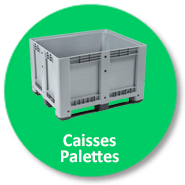
<style>
.page{position:relative;width:185px;height:185px;background:#00cc66}
.page>*{position:absolute;margin:0}
.t1{font:18px/16px "Calibri-Bold";color:#ffffff}
</style>
<div class="page">
<p class="t1" style="left:61px;top:134px;width:58px;height:29px;text-align:center">Caisses  <br>Palettes</p>
</div>
